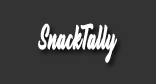
<style>
.page{position:relative;width:156px;height:84px;background:#333333}
.page>*{position:absolute;margin:0}
.t1{font:29px "Bernadette";color:#ffffff;font-weight:bold;scale:0.54 1}
</style>
<div class="page">
<p class="t1" style="left:38px;top:23px;width:79px;height:40px">SnackTally</p>
</div>
